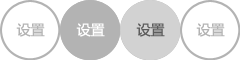
<style>
.page{position:relative;width:240px;height:60px;background:#ffffff}
.page>*{position:absolute;margin:0}
.t1{font:14px "MicrosoftYaHei";color:#b3b3b3}
.t2{font:14px "MicrosoftYaHei";color:#ffffff}
.t3{font:14px "MicrosoftYaHei";color:#5c5c5c}
</style>
<div class="page">
<p class="t1" style="left:16px;top:23px;width:29px;height:14px">设置</p>
<p class="t2" style="left:76px;top:23px;width:29px;height:14px">设置</p>
<p class="t3" style="left:136px;top:23px;width:29px;height:14px">设置</p>
<p class="t1" style="left:196px;top:23px;width:29px;height:14px">设置</p>
</div>
